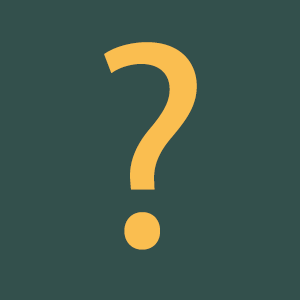
<style>
.page{position:relative;width:300px;height:300px;background:#33504c}
.page>*{position:absolute;margin:0}
.t1{font:297.8px "MyriadPro-Regular";color:#fabe50}
</style>
<div class="page">
<p class="t1" style="left:104px;top:42px;width:93px;height:208px">?</p>
</div>
